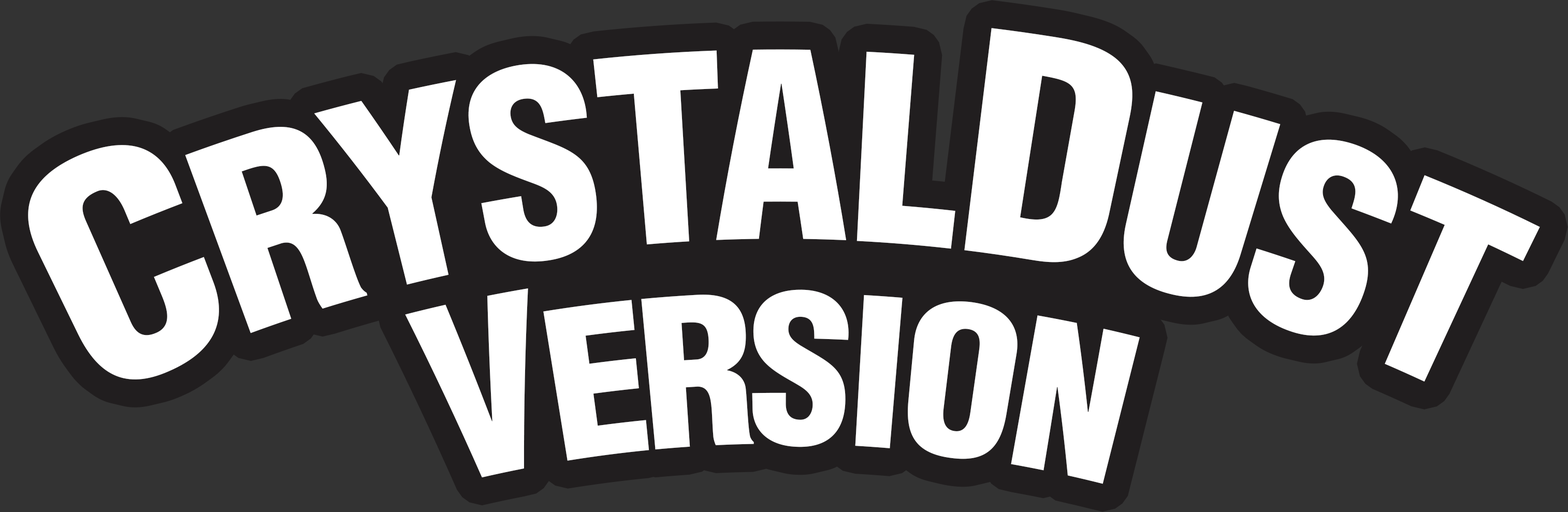
<style>
.page{position:relative;width:1568px;height:512px;background:#333333}
.page>*{position:absolute;margin:0}
.t1{font:253px "Helvetica-Condensed-Black";color:#ffffff;scale:0.77 1}
.t2{font:298.2px "Helvetica-Condensed-Black";color:#ffffff;scale:0.77 1}
.t3{font:234.8px/204.9px "Helvetica-Condensed-Black";color:#ffffff;scale:0.82 1}
.t4{font:201.5px/204.9px "Helvetica-Condensed-Black";letter-spacing:-0.03em;color:#ffffff;scale:0.92 1}
.t5{font:201.5px/204.9px "Helvetica-Condensed-Black";color:#ffffff;scale:0.92 1}
</style>
<div class="page">
<p class="t1" style="left:28px;top:28px;width:1512px;height:456px;text-align:center"><span class="t2">C</span>RYSTAL<span class="t2">D</span>UST<br><span class="t3">V</span><span class="t4">ER</span><span class="t5">SION</span></p>
</div>
